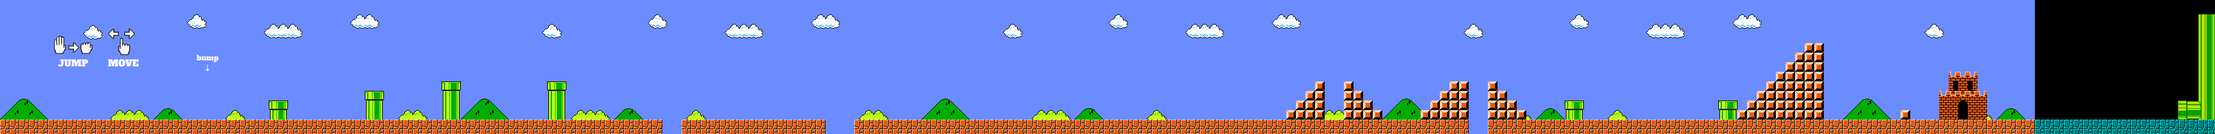
<style>
.page{position:relative;width:2215px;height:134px;background:#6b8cff}
.page>*{position:absolute;margin:0}
.t1{font:9px "AlfaSlabOne-Regular";color:#f6f6f6}
.t2{font:9px "AlfaSlabOne-Regular";color:#ffffff}
.t3{font:7.2px "AlfaSlabOne-Regular";color:#f6f6f6}
.t4{font:9px "DejaVuSans";color:#f6f6f6}
</style>
<div class="page">
<p class="t1" style="left:58px;top:59px;width:30px;height:8px">JUMP</p>
<p class="t2" style="left:108px;top:59px;width:31px;height:8px">MOVE</p>
<p class="t3" style="left:196px;top:55px;width:23px;height:17px;text-align:center">bump<br><span class="t4">↓</span></p>
</div>
